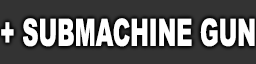
<style>
.page{position:relative;width:256px;height:64px;background:#333333}
.page>*{position:absolute;margin:0}
.t1{font:37.5px "Arial-Black";color:#ffffff;scale:0.6 1}
</style>
<div class="page">
<p class="t1" style="left:1px;top:18px;width:254px;height:29px">+ SUBMACHINE GUN</p>
</div>
